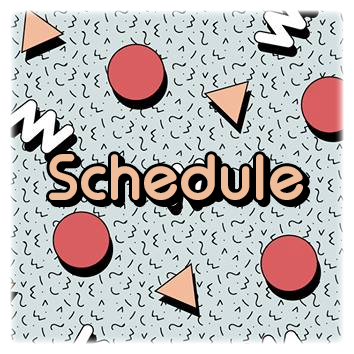
<style>
.page{position:relative;width:354px;height:354px}
.page>*{position:absolute;margin:0}
.t1{font:60px "TypoRoundBoldDemo";color:#efbd99}
</style>
<div class="page">
<p class="t1" style="left:49px;top:154px;width:254px;height:46px">Schedule</p>
</div>
